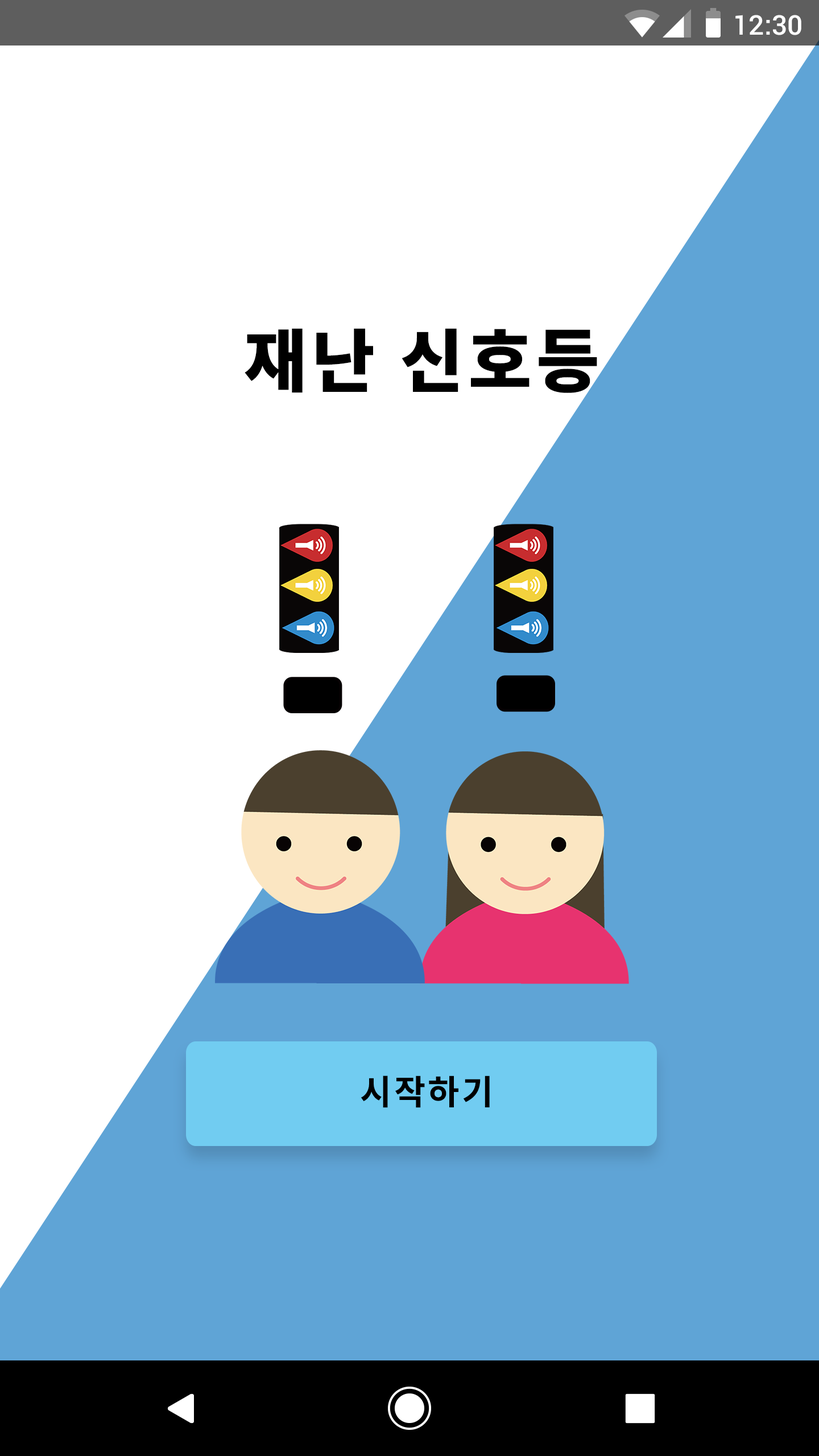
<style>
.page{position:relative;width:819px;height:1456px;background:#ffffff}
.page>*{position:absolute;margin:0}
.t1{font:27.3px "Roboto-Medium";color:#ffffff}
.t2{font:68.2px "NotoSansCJKkr-Black";letter-spacing:0.075em;color:#000000}
.t3{font:34.3px "NotoSansCJKkr-Bold";letter-spacing:0.075em;color:#000000}
</style>
<div class="page">
<p class="t1" style="left:735px;top:15px;width:66px;height:20px">12:30</p>
<p class="t2" style="left:245px;top:328px;width:352px;height:65px">재난 신호등</p>
<p class="t3" style="left:361px;top:1075px;width:129px;height:33px">시작하기</p>
</div>
